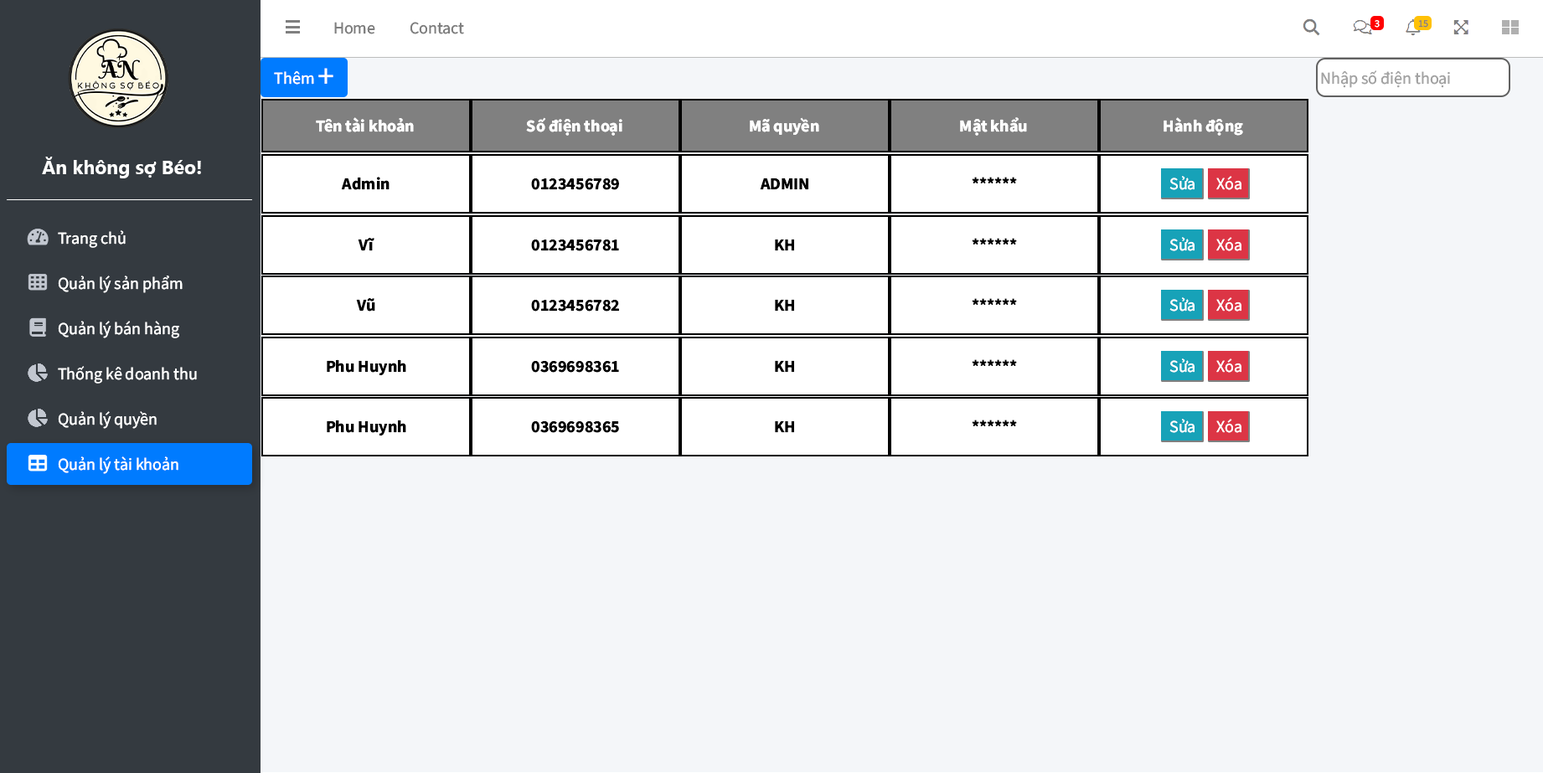
<style>
.page{position:relative;width:1543px;height:773px;background:#f4f6f9}
.page>*{position:absolute;margin:0}
.t1{font:16.7px "SourceSansRoman-Regular";color:#7f7f7f}
.t2{font:10px "SourceSansRoman-Regular";color:#ffffff}
.t3{font:10px "SourceSansRoman-Regular";color:#857f7f}
.t4{font:16.7px "SourceSansRoman-Regular";color:#ffffff}
.t5{font:33.5px "SourceSansRoman-Regular";color:#ffffff}
.t6{font:16.7px "SourceSansRoman-Regular";color:#a3a3a3}
.t7{font:16.7px "SourceSansRoman-Bold";color:#ffffff}
.t8{font:19.3px "SegoeUI-Bold";color:#ffffff}
.t9{font:16.7px "SourceSansRoman-Bold";color:#000000}
</style>
<div class="page">
<p class="t1" style="left:334px;top:22px;width:41px;height:12px">Home</p>
<p class="t1" style="left:410px;top:22px;width:54px;height:12px">Contact</p>
<p class="t2" style="left:1374px;top:20px;width:5px;height:8px">3</p>
<p class="t3" style="left:1418px;top:20px;width:10px;height:8px">15</p>
<p class="t4" style="left:274px;top:71px;width:40px;height:14px">Thêm</p>
<p class="t5" style="left:318px;top:68px;width:15px;height:16px">+</p>
<p class="t6" style="left:1321px;top:70px;width:129px;height:18px">Nhập số điện thoại</p>
<p class="t7" style="left:316px;top:117px;width:98px;height:15px">Tên tài khoản</p>
<p class="t7" style="left:526px;top:117px;width:96px;height:19px">Số điện thoại</p>
<p class="t7" style="left:750px;top:117px;width:69px;height:18px">Mã quyền</p>
<p class="t7" style="left:960px;top:117px;width:67px;height:19px">Mật khẩu</p>
<p class="t7" style="left:1163px;top:117px;width:80px;height:19px">Hành động</p>
<p class="t8" style="left:42px;top:157px;width:159px;height:21px">Ăn không sợ Béo!</p>
<p class="t9" style="left:342px;top:177px;width:47px;height:13px">Admin</p>
<p class="t9" style="left:531px;top:178px;width:88px;height:12px">0123456789</p>
<p class="t9" style="left:760px;top:178px;width:48px;height:12px">ADMIN</p>
<p class="t9" style="left:971px;top:177px;width:46px;height:6px">******</p>
<p class="t4" style="left:1169px;top:176px;width:25px;height:14px">Sửa</p>
<p class="t4" style="left:1216px;top:176px;width:25px;height:14px">Xóa</p>
<p class="t4" style="left:58px;top:230px;width:68px;height:18px">Trang chủ</p>
<p class="t9" style="left:358px;top:238px;width:16px;height:13px">Vĩ</p>
<p class="t9" style="left:531px;top:240px;width:88px;height:11px">0123456781</p>
<p class="t9" style="left:775px;top:239px;width:19px;height:12px">KH</p>
<p class="t9" style="left:971px;top:238px;width:46px;height:7px">******</p>
<p class="t4" style="left:1169px;top:237px;width:25px;height:14px">Sửa</p>
<p class="t4" style="left:1216px;top:237px;width:25px;height:14px">Xóa</p>
<p class="t4" style="left:58px;top:276px;width:125px;height:17px">Quản lý sản phẩm</p>
<p class="t9" style="left:356px;top:298px;width:19px;height:14px">Vũ</p>
<p class="t9" style="left:531px;top:300px;width:88px;height:12px">0123456782</p>
<p class="t9" style="left:775px;top:299px;width:19px;height:13px">KH</p>
<p class="t9" style="left:971px;top:298px;width:46px;height:7px">******</p>
<p class="t4" style="left:1169px;top:297px;width:25px;height:15px">Sửa</p>
<p class="t4" style="left:1216px;top:297px;width:25px;height:15px">Xóa</p>
<p class="t4" style="left:58px;top:321px;width:121px;height:17px">Quản lý bán hàng</p>
<p class="t4" style="left:58px;top:366px;width:139px;height:18px">Thống kê doanh thu</p>
<p class="t9" style="left:327px;top:359px;width:79px;height:16px">Phu Huynh</p>
<p class="t9" style="left:531px;top:361px;width:88px;height:12px">0369698361</p>
<p class="t9" style="left:775px;top:360px;width:19px;height:13px">KH</p>
<p class="t9" style="left:971px;top:359px;width:46px;height:7px">******</p>
<p class="t4" style="left:1169px;top:358px;width:25px;height:15px">Sửa</p>
<p class="t4" style="left:1216px;top:358px;width:25px;height:15px">Xóa</p>
<p class="t4" style="left:58px;top:411px;width:99px;height:18px">Quản lý quyền</p>
<p class="t9" style="left:327px;top:420px;width:79px;height:15px">Phu Huynh</p>
<p class="t9" style="left:531px;top:421px;width:88px;height:12px">0369698365</p>
<p class="t9" style="left:775px;top:420px;width:19px;height:13px">KH</p>
<p class="t9" style="left:971px;top:420px;width:46px;height:6px">******</p>
<p class="t4" style="left:1169px;top:419px;width:25px;height:14px">Sửa</p>
<p class="t4" style="left:1216px;top:419px;width:25px;height:14px">Xóa</p>
<p class="t4" style="left:58px;top:456px;width:120px;height:18px">Quản lý tài khoản</p>
</div>
